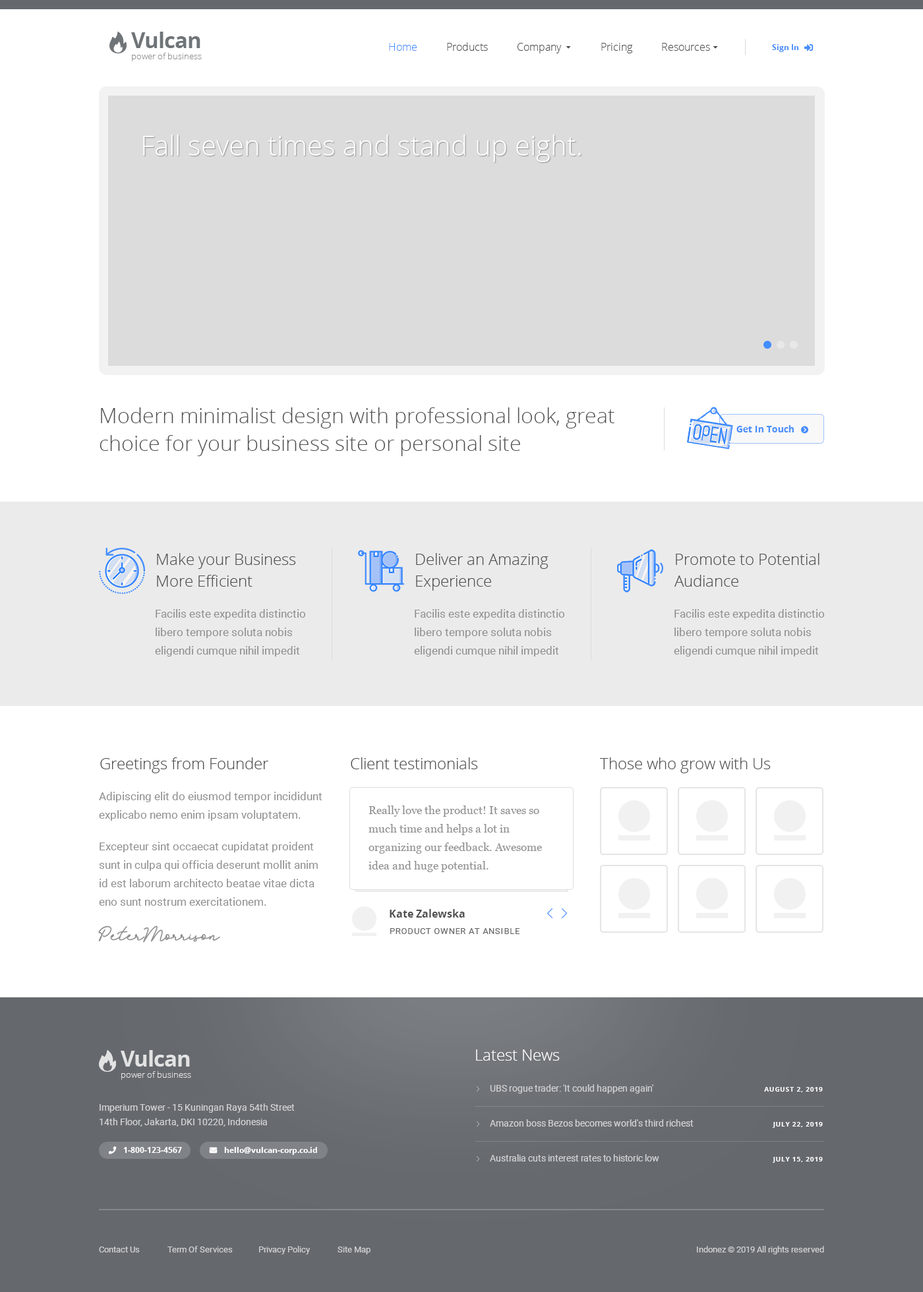
<style>
.page{position:relative;width:923px;height:1292px;background:#ffffff}
.page>*{position:absolute;margin:0}
.t1{font:21.8px "OpenSans-Bold";letter-spacing:-0.03em;color:#6f7478}
.t2{font:8.6px "OpenSans-Light";color:#8f8f8f}
.t3{font:10.5px "OpenSans-Light";color:#4f4f4f}
.t4{font:10.5px "OpenSans-Light";color:#468efc}
.t5{font:7.9px "OpenSans-Bold";color:#468efc}
.t6{font:27.7px "OpenSans-Light";color:#ffffff}
.t7{font:21.1px/27.7px "OpenSans-Light";color:#4f4f4f}
.t8{font:9.2px "OpenSans-Bold";color:#468efc}
.t9{font:15.8px/21.8px "OpenSans-Light";color:#4f4f4f}
.t10{font:11.2px/18.5px "Roboto-Regular";color:#8f8f8f}
.t11{font:15.8px "OpenSans-Light";color:#4f4f4f}
.t12{font:11.2px/18.5px "Georgia";color:#8f8f8f}
.t13{font:10.5px "OpenSans-Bold";color:#4f4f4f}
.t14{font:17.8px "Bathilda";color:#8f8f8f}
.t15{font:8.6px "Roboto-Regular";letter-spacing:0.06em;color:#666666}
.t16{font:15.8px "OpenSans-Light";color:#ffffff}
.t17{font:21.8px "OpenSans-Bold";letter-spacing:-0.03em;color:#e3e3e3}
.t18{font:8.6px "OpenSans-Light";color:#e3e3e3}
.t19{font:9.2px/34.9px "Roboto-Regular";color:#d1d2d3}
.t20{font:6.6px/34.9px "OpenSans-Bold";letter-spacing:0.06em;color:#ffffff;text-transform:uppercase}
.t21{font:9.2px/14.5px "Roboto-Regular";color:#d1d2d3}
.t22{font:7.9px "OpenSans-Bold";color:#ffffff}
.t23{font:8.6px "Roboto-Regular";color:#d1d2d3}
</style>
<div class="page">
<p class="t1" style="left:131px;top:32px;width:69px;height:16px">Vulcan</p>
<p class="t2" style="left:132px;top:53px;width:70px;height:8px">power of business</p>
<p class="t3" style="left:389px;top:42px;width:321px;height:11px"><span class="t4">Home</span>           Products           Company               Pricing           Resources</p>
<p class="t5" style="left:772px;top:44px;width:27px;height:8px">Sign In</p>
<p class="t6" style="left:143px;top:134px;width:438px;height:28px">Fall seven times and stand up eight.</p>
<p class="t7" style="left:100px;top:407px;width:514px;height:49px">Modern minimalist design with professional look, great<br>choice for your business site or personal site</p>
<p class="t8" style="left:736px;top:425px;width:58px;height:7px">Get In Touch</p>
<p class="t9" style="left:157px;top:553px;width:139px;height:34px">Make your Business<br>More Efficient</p>
<p class="t9" style="left:416px;top:553px;width:132px;height:38px">Deliver an Amazing<br>Experience</p>
<p class="t9" style="left:674px;top:553px;width:145px;height:34px">Promote to Potential<br>Audiance</p>
<p class="t10" style="left:155px;top:609px;width:150px;height:48px">Facilis este expedita distinctio libero tempore soluta nobis eligendi cumque nihil impedit</p>
<p class="t10" style="left:414px;top:609px;width:150px;height:48px">Facilis este expedita distinctio libero tempore soluta nobis eligendi cumque nihil impedit</p>
<p class="t10" style="left:674px;top:609px;width:150px;height:48px">Facilis este expedita distinctio libero tempore soluta nobis eligendi cumque nihil impedit</p>
<p class="t11" style="left:100px;top:757px;width:168px;height:16px">Greetings from Founder</p>
<p class="t11" style="left:351px;top:757px;width:127px;height:12px">Client testimonials</p>
<p class="t11" style="left:600px;top:757px;width:171px;height:16px">Those who grow with Us</p>
<p class="t10" style="left:99px;top:792px;width:223px;height:29px">Adipiscing elit do eiusmod tempor incididunt explicabo nemo enim ipsam voluptatem.</p>
<p class="t12" style="left:368px;top:806px;width:174px;height:66px">Really love the product! It saves so much time and helps a lot in<br>organizing our feedback. Awesome idea and huge potential.</p>
<p class="t10" style="left:99px;top:842px;width:219px;height:64px">Excepteur sint occaecat cupidatat proident sunt in culpa qui officia deserunt mollit anim id est laborum architecto beatae vitae dicta eno sunt nostrum exercitationem.</p>
<p class="t13" style="left:390px;top:909px;width:75px;height:9px">Kate Zalewska</p>
<p class="t14" style="left:98px;top:926px;width:122px;height:17px">PeterMorrison</p>
<p class="t15" style="left:390px;top:928px;width:130px;height:6px">PRODUCT OWNER AT ANSIBLE</p>
<p class="t16" style="left:476px;top:1049px;width:84px;height:12px">Latest News</p>
<p class="t17" style="left:121px;top:1050px;width:69px;height:17px">Vulcan</p>
<p class="t18" style="left:121px;top:1071px;width:70px;height:9px">power of business</p>
<p class="t19" style="left:490px;top:1084px;width:203px;height:78px">UBS rogue trader: 'It could happen again'<br>Amazon boss Bezos becomes world's third richest<br>Australia cuts interest rates to historic low</p>
<p class="t20" style="left:764px;top:1087px;width:59px;height:76px;text-align:right">August 2, 2019<br>July 22, 2019<br>July 15, 2019</p>
<p class="t21" style="left:100px;top:1104px;width:195px;height:23px">Imperium Tower - 15 Kuningan Raya 54th Street<br>14th Floor, Jakarta, DKI 10220, Indonesia</p>
<p class="t22" style="left:123px;top:1147px;width:59px;height:6px">1-800-123-4567</p>
<p class="t22" style="left:224px;top:1147px;width:93px;height:8px">hello@vulcan-corp.co.id</p>
<p class="t23" style="left:99px;top:1246px;width:271px;height:8px">Contact Us              Term Of Services             Privacy Policy              Site Map</p>
<p class="t23" style="left:697px;top:1246px;width:127px;height:8px">Indonez © 2019 All rights reserved</p>
</div>
